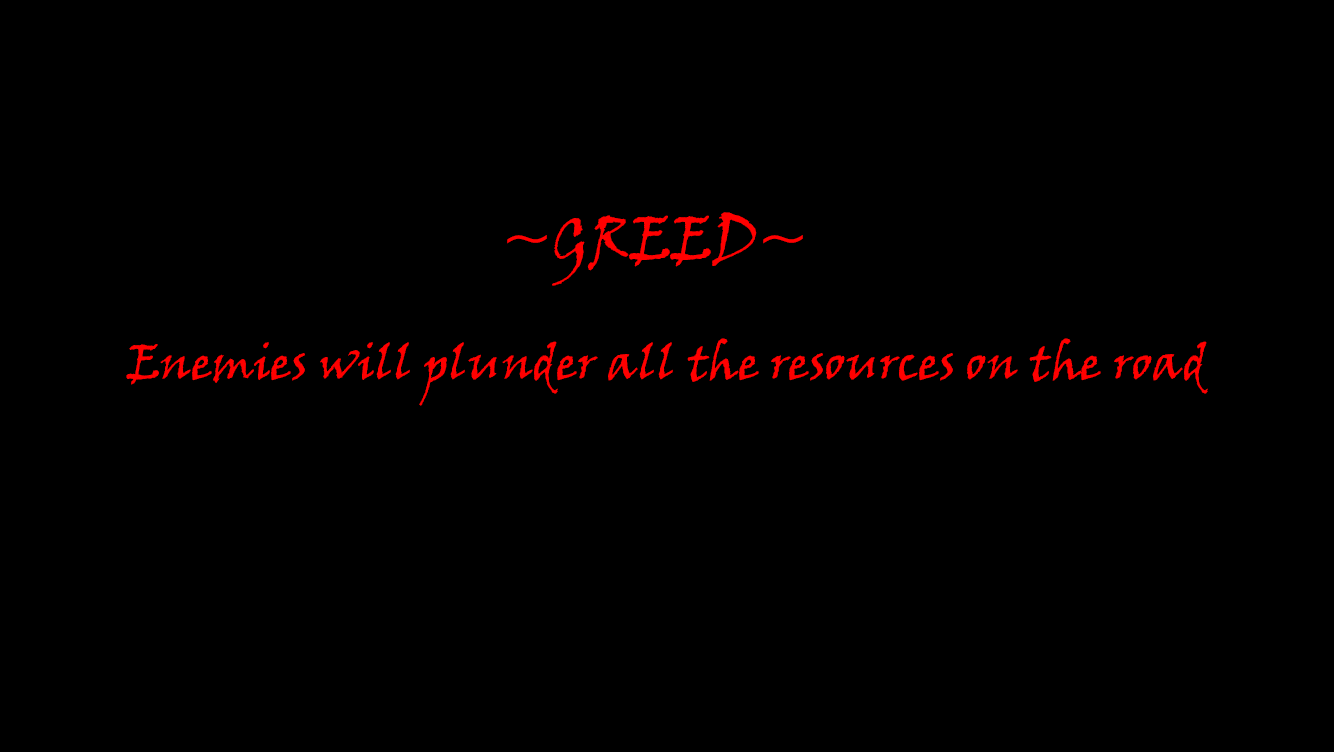
<style>
.page{position:relative;width:1334px;height:752px;background:#000000}
.page>*{position:absolute;margin:0}
.t1{font:60px "VinerHandITC";color:#ff0000}
.t2{font:48px "VinerHandITC";color:#ff0000}
</style>
<div class="page">
<p class="t1" style="left:507px;top:212px;width:296px;height:74px">~GREED~</p>
<p class="t2" style="left:126px;top:338px;width:1082px;height:68px">Enemies will plunder all the resources on the road</p>
</div>
